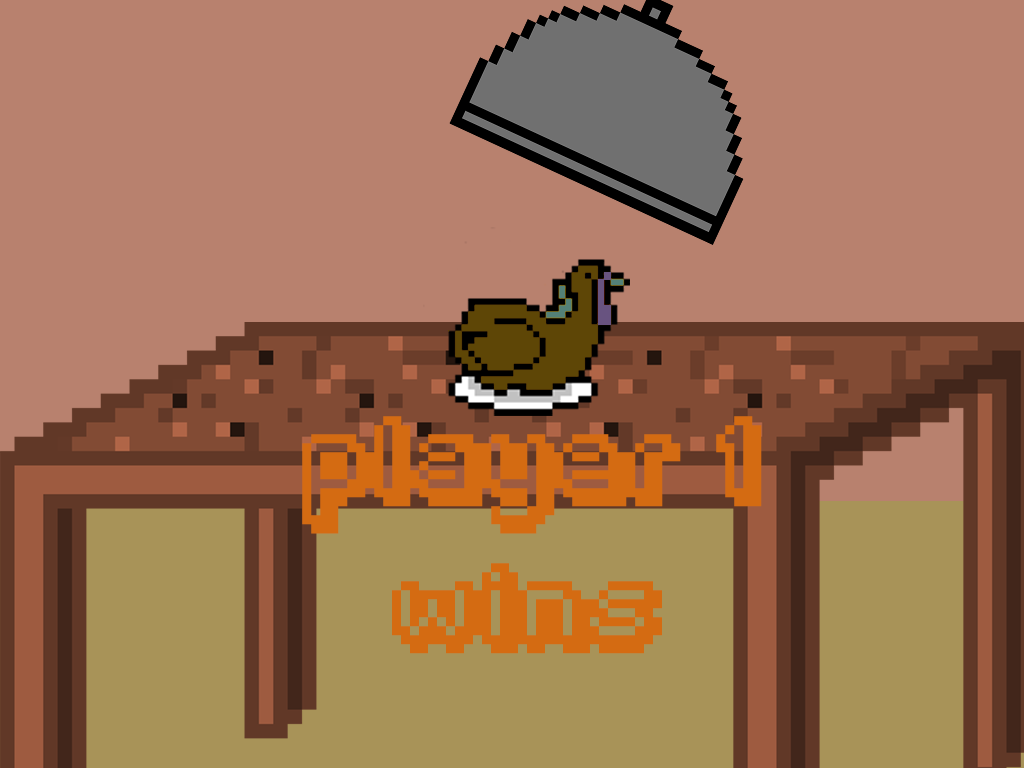
<style>
.page{position:relative;width:1024px;height:768px;background:#b8816e}
.page>*{position:absolute;margin:0}
.t1{font:72px "Fipps-Regular";color:#d46b12}
</style>
<div class="page">
<p class="t1" style="left:302px;top:416px;width:460px;height:118px">player 1</p>
<p class="t1" style="left:392px;top:563px;width:270px;height:91px">wins</p>
</div>
